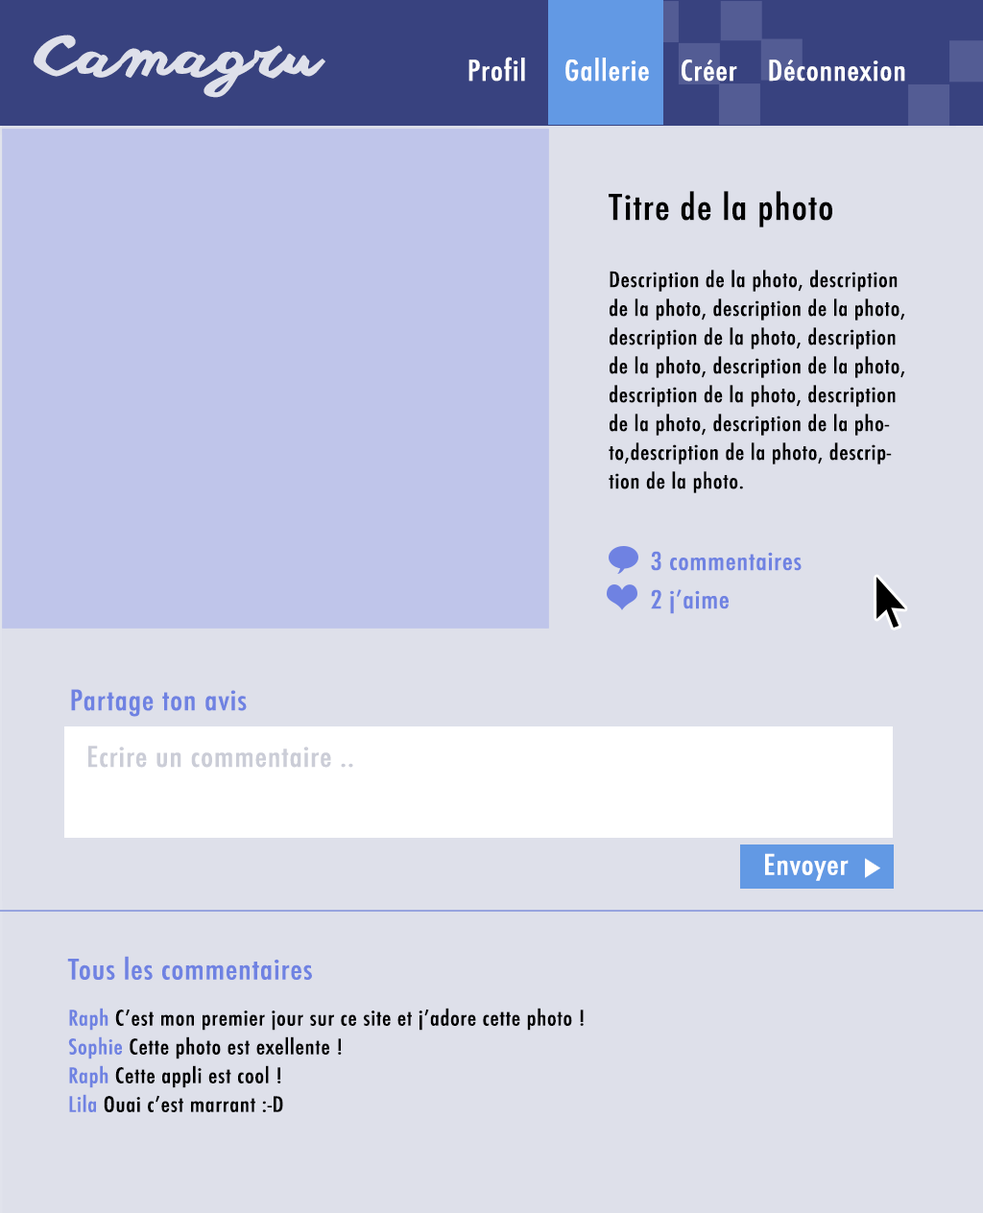
<style>
.page{position:relative;width:983px;height:1213px;background:#dee0ea}
.page>*{position:absolute;margin:0}
.t1{font:55.3px "anothershabby";color:#dee0ea;scale:1.17 1}
.t2{font:27.6px "Futura-CondensedMedium";letter-spacing:0.025em;color:#ffffff;scale:1.17 1}
.t3{font:20.7px/28.8px "Futura-CondensedMedium";letter-spacing:0.025em;color:#000000;scale:1.17 1}
.t4{font:34.6px/38.4px "Futura-CondensedMedium";letter-spacing:0.025em;color:#000000;scale:1.17 1}
.t5{font:24.2px/38.4px "Futura-CondensedMedium";letter-spacing:0.025em;color:#6f82e2;scale:1.17 1}
.t6{font:27.6px "Futura-CondensedMedium";letter-spacing:0.025em;color:#6f82e2;scale:1.17 1}
.t7{font:27.6px "Futura-CondensedMedium";letter-spacing:0.025em;color:#cbcdd7;scale:1.17 1}
.t8{font:27.6px/28.8px "Futura-CondensedMedium";letter-spacing:0.025em;color:#6f82e2;scale:1.17 1}
.t9{font:20.7px/46.1px "Futura-CondensedMedium";letter-spacing:0.025em;color:#6f82e2;scale:1.17 1}
.t10{font:20.7px/28.8px "Futura-CondensedMedium";letter-spacing:0.025em;color:#6f82e2;scale:1.17 1}
</style>
<div class="page">
<p class="t1" style="left:34px;top:35px;width:291px;height:63px">Camagru</p>
<p class="t2" style="left:468px;top:57px;width:437px;height:25px">Profil     Gallerie    Créer    Déconnexion</p>
<p class="t3" style="left:609px;top:191px;width:296px;height:302px"><span class="t4">Titre de la photo<br><br></span>Description de la photo, description de la photo, description de la photo, description de la photo, description de la photo, description de la photo, description de la photo, description de la photo, description de la photo,description de la photo, description de la photo.</p>
<p class="t5" style="left:651px;top:551px;width:150px;height:63px">3 commentaires<br>2 j’aime</p>
<p class="t6" style="left:71px;top:689px;width:176px;height:28px">Partage ton avis</p>
<p class="t7" style="left:88px;top:746px;width:265px;height:22px">Ecrire un commentaire ..</p>
<p class="t2" style="left:765px;top:853px;width:83px;height:28px">Envoyer</p>
<p class="t3" style="left:67px;top:956px;width:517px;height:156px"><span class="t8">Tous les commentaires <br></span><span class="t9">R</span><span class="t10">aph </span>C’est mon premier jour sur ce site et j’adore cette photo !<br><span class="t10">Sophie </span>Cette photo est exellente ! <br><span class="t10">Raph </span>Cette appli est cool !<br><span class="t10">Lila </span>Ouai c’est marrant :-D</p>
</div>
